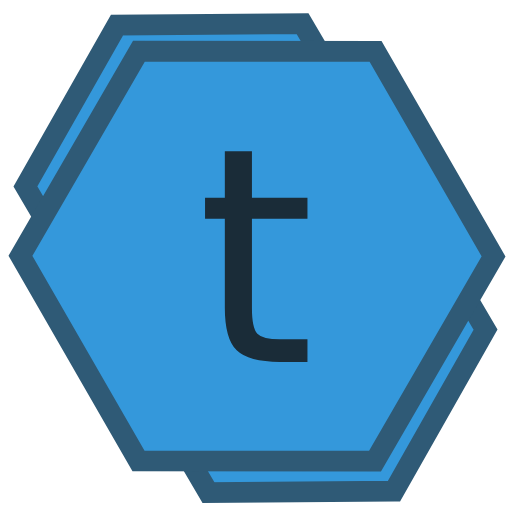
<style>
.page{position:relative;width:512px;height:512px;background:#3498db}
.page>*{position:absolute;margin:0}
.t1{font:300px "DejaVuSans";color:#1a2c38}
</style>
<div class="page">
<p class="t1" style="left:205px;top:151px;width:103px;height:211px">t</p>
</div>
